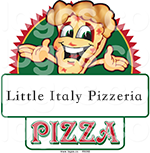
<style>
.page{position:relative;width:150px;height:153px;background:#ffffff}
.page>*{position:absolute;margin:0}
.t1{font:14.7px "STKaiTi-TC-Bold";letter-spacing:0.075em;color:#0f0f0f}
</style>
<div class="page">
<p class="t1" style="left:6px;top:90px;width:136px;height:14px">Little Italy Pizzeria</p>
</div>
